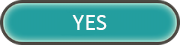
<style>
.page{position:relative;width:180px;height:45px}
.page>*{position:absolute;margin:0}
.t1{font:24px "Calibri";color:#fefefe}
</style>
<div class="page">
<p class="t1" style="left:72px;top:15px;width:35px;height:15px">YES</p>
</div>
